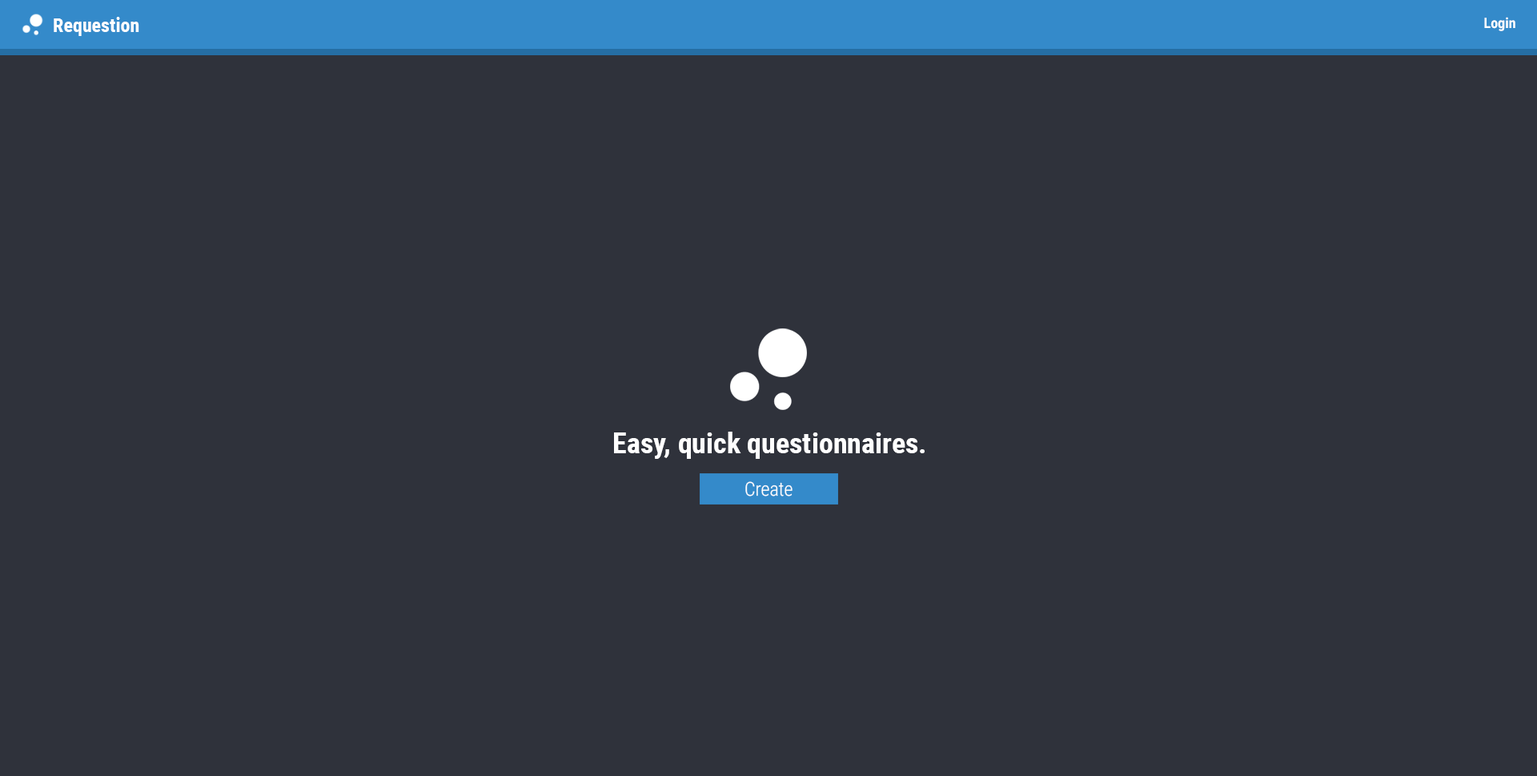
<style>
.page{position:relative;width:1537px;height:776px;background:#2f323b}
.page>*{position:absolute;margin:0}
.t1{font:19.2px "RobotoCondensed-Bold";color:#ffffff}
.t2{font:14.4px "RobotoCondensed-Bold";color:#ffffff}
.t3{font:28.8px "RobotoCondensed-Bold";color:#ffffff}
.t4{font:19.2px "RobotoCondensed-Light";color:#ffffff}
</style>
<div class="page">
<p class="t1" style="left:54px;top:17px;width:85px;height:19px">Requestion</p>
<p class="t2" style="left:1484px;top:17px;width:31px;height:14px">Login</p>
<p class="t3" style="left:614px;top:432px;width:311px;height:27px">Easy, quick questionnaires.</p>
<p class="t4" style="left:745px;top:481px;width:48px;height:15px">Create</p>
</div>
